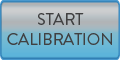
<style>
.page{position:relative;width:120px;height:60px}
.page>*{position:absolute;margin:0}
.t1{font:16.7px "BrandonGrotesque-Regular";color:#404041}
</style>
<div class="page">
<p class="t1" style="left:7px;top:13px;width:105px;height:32px;text-align:center">START<br>CALIBRATION</p>
</div>
